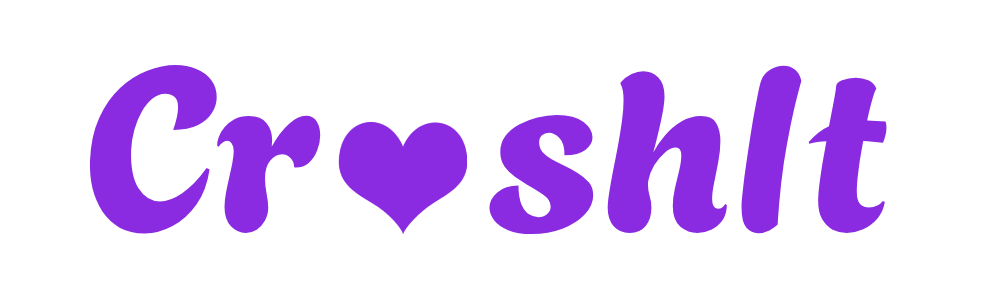
<style>
.page{position:relative;width:1000px;height:300px;background:#ffffff}
.page>*{position:absolute;margin:0}
.t1{font:230px "Agbalumo-Regular";color:#8a2be2}
</style>
<div class="page">
<p class="t1" style="left:89px;top:65px;width:798px;height:170px">Cr    shIt</p>
</div>
